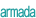
<style>
.page{position:relative;width:36px;height:18px;background:#ffffff}
.page>*{position:absolute;margin:0}
.t1{font:14px "GothicMB101Pro-Regular";letter-spacing:-0.08em;color:#239e9f;font-weight:bold;scale:0.72 1}
</style>
<div class="page">
<p class="t1" style="left:0px;top:5px;width:36px;height:13px">armada</p>
</div>
